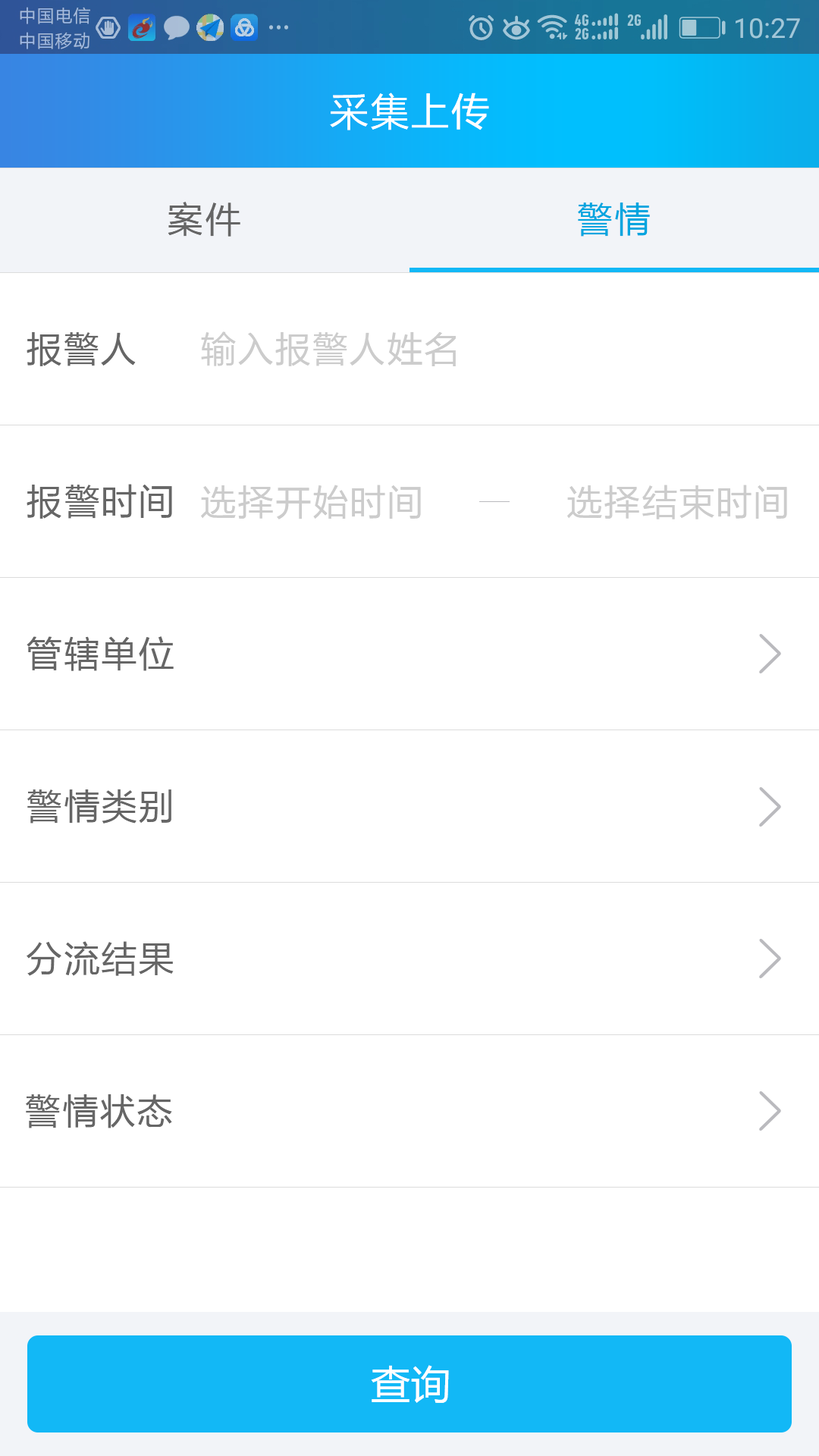
<style>
.page{position:relative;width:819px;height:1456px;background:#ffffff}
.page>*{position:absolute;margin:0}
.t1{font:39.4px "FZLTHK--GBK1-0";letter-spacing:0.025em;color:#ffffff}
.t2{font:36.4px "FZLTHK--GBK1-0";letter-spacing:0.025em;color:#666666}
.t3{font:36.4px "FZLTHK--GBK1-0";letter-spacing:0.025em;color:#00a5df}
.t4{font:36.4px "FZLTHK--GBK1-0";letter-spacing:0.025em;color:#cccccc}
.t5{font:39.4px "MicrosoftYaHei";letter-spacing:0.025em;color:#ffffff}
</style>
<div class="page">
<p class="t1" style="left:330px;top:93px;width:159px;height:37px">采集上传</p>
<p class="t2" style="left:168px;top:202px;width:72px;height:35px">案件</p>
<p class="t3" style="left:578px;top:202px;width:72px;height:35px">警情</p>
<p class="t2" style="left:27px;top:332px;width:109px;height:34px">报警人</p>
<p class="t4" style="left:201px;top:331px;width:255px;height:35px">输入报警人姓名</p>
<p class="t2" style="left:27px;top:484px;width:145px;height:35px">报警时间</p>
<p class="t4" style="left:201px;top:485px;width:220px;height:34px">选择开始时间</p>
<p class="t4" style="left:567px;top:485px;width:220px;height:34px">选择结束时间</p>
<p class="t2" style="left:27px;top:636px;width:147px;height:35px">管辖单位</p>
<p class="t2" style="left:27px;top:789px;width:144px;height:35px">警情类别</p>
<p class="t2" style="left:27px;top:941px;width:147px;height:35px">分流结果</p>
<p class="t2" style="left:26px;top:1094px;width:146px;height:34px">警情状态</p>
<p class="t5" style="left:371px;top:1365px;width:78px;height:38px">查询</p>
</div>
